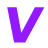
<style>
.page{position:relative;width:48px;height:48px;background:#ffffff}
.page>*{position:absolute;margin:0}
.t1{font:48px "DejaVuSans-Bold";color:#9519ff;font-style:italic}
</style>
<div class="page">
<p class="t1" style="left:7px;top:7px;width:38px;height:36px">V</p>
</div>
